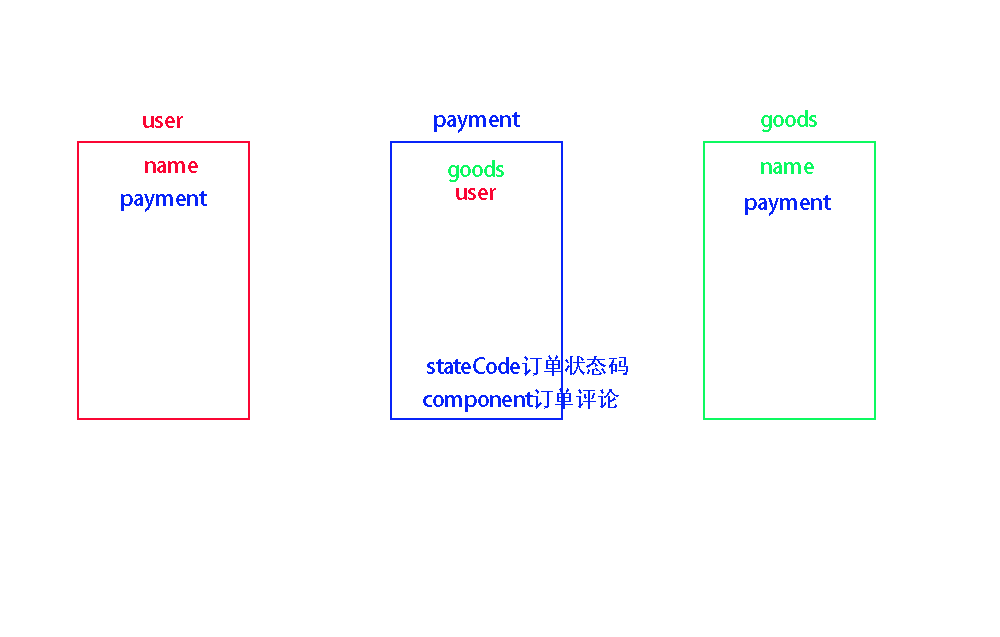
<style>
.page{position:relative;width:1000px;height:637px;background:#ffffff}
.page>*{position:absolute;margin:0}
.t1{font:21.8px "AdobeHeitiStd-Regular";color:#0824f8}
.t2{font:21.8px "AdobeHeitiStd-Regular";color:#0df960}
.t3{font:21.8px "AdobeHeitiStd-Regular";color:#fa0634}
</style>
<div class="page">
<p class="t1" style="left:434px;top:112px;width:86px;height:21px">payment</p>
<p class="t2" style="left:761px;top:110px;width:56px;height:22px">goods</p>
<p class="t3" style="left:143px;top:116px;width:40px;height:12px">user</p>
<p class="t3" style="left:145px;top:161px;width:53px;height:12px">name</p>
<p class="t2" style="left:448px;top:160px;width:56px;height:22px">goods</p>
<p class="t2" style="left:761px;top:162px;width:53px;height:12px">name</p>
<p class="t1" style="left:121px;top:191px;width:86px;height:21px">payment</p>
<p class="t3" style="left:456px;top:188px;width:40px;height:12px">user</p>
<p class="t1" style="left:745px;top:195px;width:86px;height:21px">payment</p>
<p class="t1" style="left:427px;top:355px;width:201px;height:21px">stateCode订单状态码</p>
<p class="t1" style="left:423px;top:388px;width:196px;height:24px">component订单评论</p>
</div>
